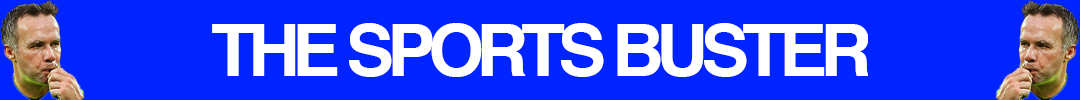
<style>
.page{position:relative;width:1080px;height:100px;background:#0024ff}
.page>*{position:absolute;margin:0}
.t1{font:72px "Helvetica-Bold";letter-spacing:-0.1em;color:#ffffff}
</style>
<div class="page">
<p class="t1" style="left:212px;top:23px;width:656px;height:54px">THE SPORTS BUSTER</p>
</div>
